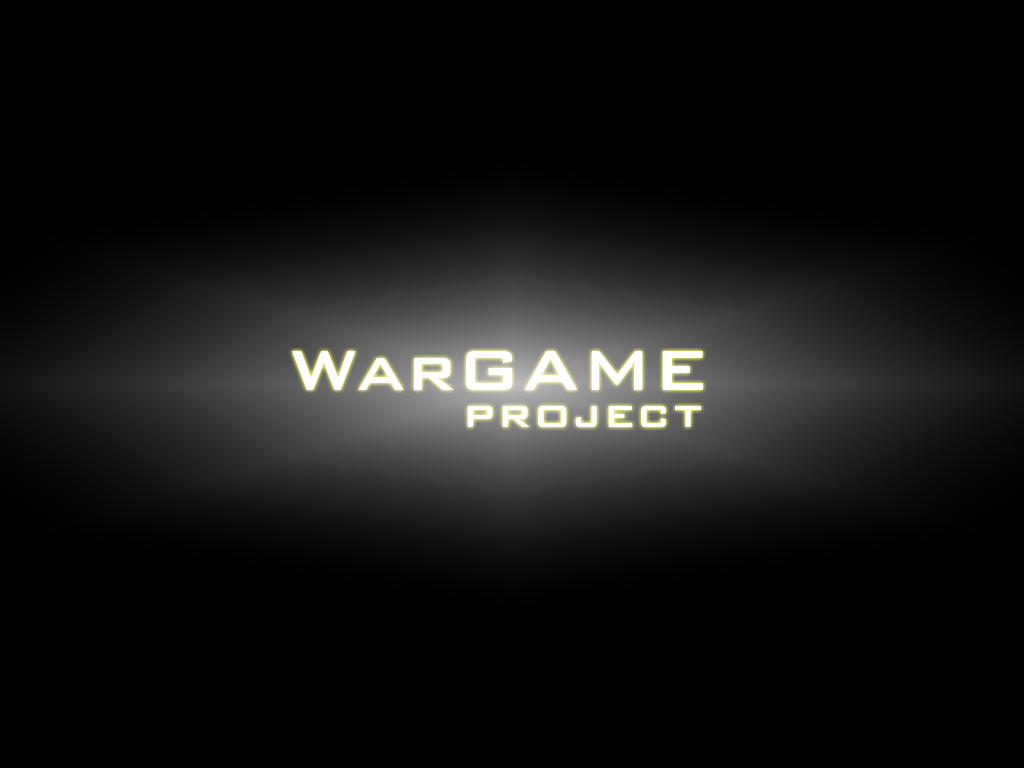
<style>
.page{position:relative;width:1024px;height:768px;background:#000000}
.page>*{position:absolute;margin:0}
.t1{font:75px "BankGothicBT-Medium";letter-spacing:0.025em;color:#ffffff}
.t2{font:50px "BankGothicBT-Medium";letter-spacing:0.05em;color:#ffffff}
</style>
<div class="page">
<p class="t1" style="left:291px;top:351px;width:412px;height:39px">WarGAME</p>
<p class="t2" style="left:467px;top:406px;width:235px;height:21px">project</p>
</div>
